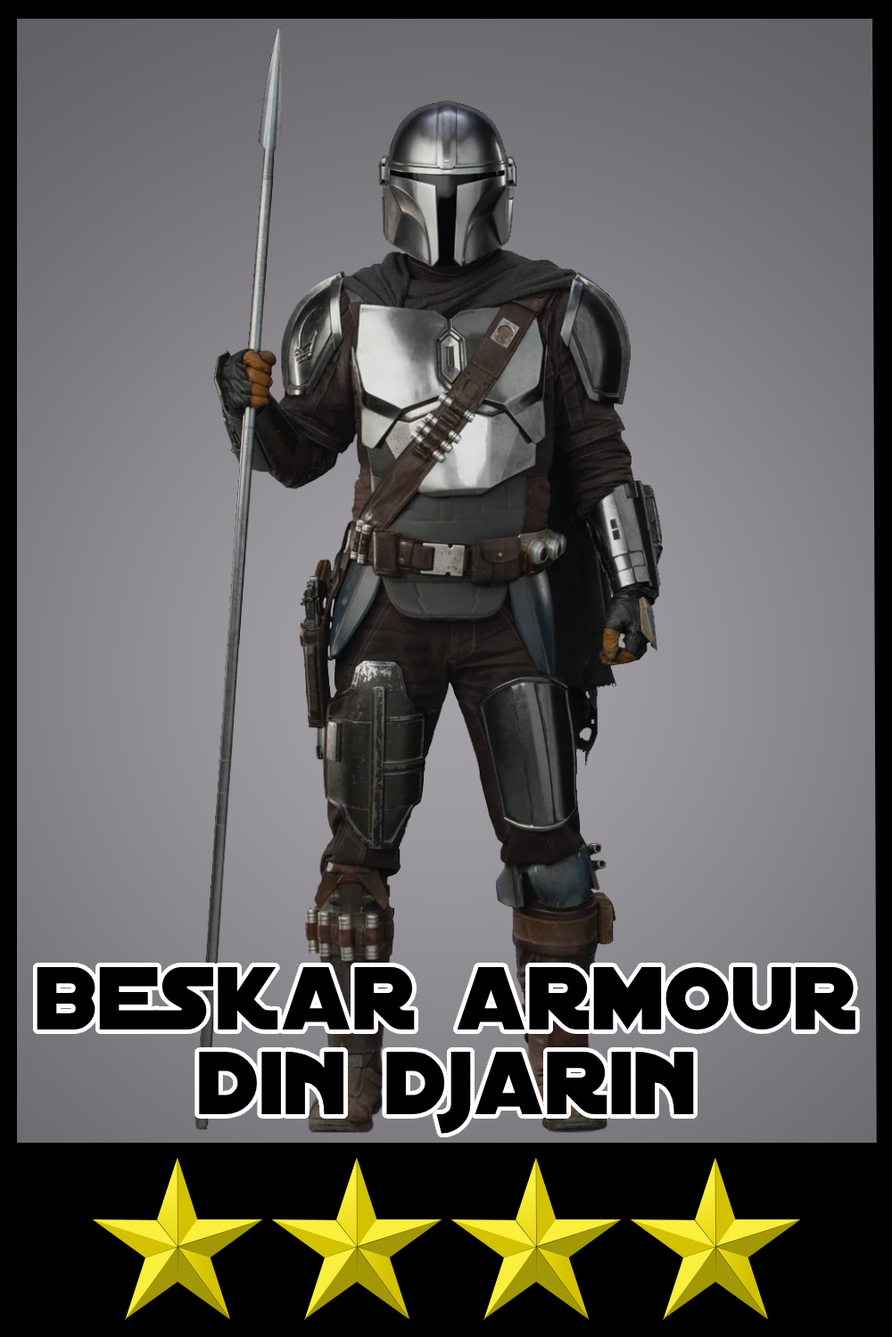
<style>
.page{position:relative;width:892px;height:1337px}
.page>*{position:absolute;margin:0}
.t1{font:96.1px/85px "DistantGalaxy";color:#000000}
</style>
<div class="page">
<p class="t1" style="left:37px;top:967px;width:818px;height:167px;text-align:center">beskar armour<br>din djarin</p>
</div>
